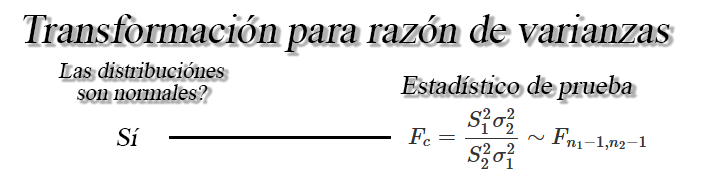
<style>
.page{position:relative;width:703px;height:177px;background:#ffffff}
.page>*{position:absolute;margin:0}
.t1{font:30.5px "TimesNewRomanPSMT";color:#000000;font-style:italic}
.t2{font:22.7px/21.7px "TimesNewRomanPSMT";color:#000000;font-style:italic}
.t3{font:20.4px "TimesNewRomanPSMT";color:#000000;font-style:italic}
.t4{font:26.7px "TimesNewRomanPSMT";color:#000000;font-style:italic}
</style>
<div class="page">
<p class="t1" style="left:23px;top:14px;width:647px;height:38px">Transformación para razón de varianzas</p>
<p class="t2" style="left:58px;top:62px;width:166px;height:38px;text-align:center">Las distribuciónes<br>son normales?</p>
<p class="t3" style="left:400px;top:75px;width:233px;height:25px">Estadístico de prueba</p>
<p class="t4" style="left:116px;top:128px;width:24px;height:18px">Sí</p>
</div>
